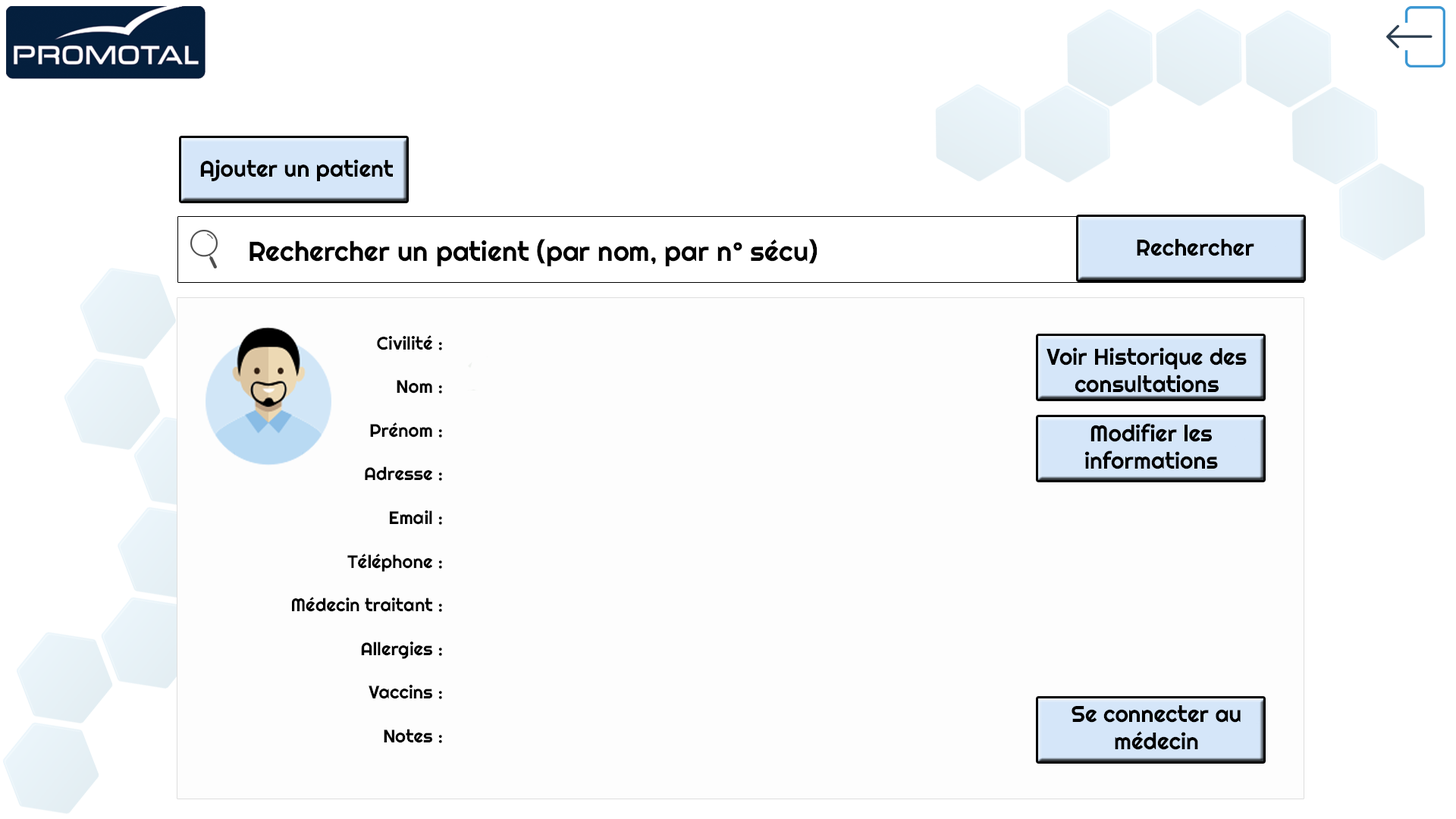
<style>
.page{position:relative;width:1456px;height:819px;background:#ffffff}
.page>*{position:absolute;margin:0}
.t1{font:22.7px "Righteous-Regular";color:#000000}
.t2{font:27.3px "Righteous-Regular";color:#000000}
.t3{font:18.2px "Righteous-Regular";color:#000000}
</style>
<div class="page">
<p class="t1" style="left:200px;top:159px;width:193px;height:22px">Ajouter un patient</p>
<p class="t2" style="left:249px;top:239px;width:568px;height:28px">Rechercher un patient (par nom, par n° sécu)</p>
<p class="t1" style="left:1137px;top:239px;width:117px;height:17px">Rechercher</p>
<p class="t3" style="left:292px;top:335px;width:150px;height:408px;text-align:right">Civilité :<br><br>Nom :<br><br>Prénom :<br><br>Adresse :<br><br>Email :<br><br>Téléphone :<br><br>Médecin traitant :<br><br>Allergies :<br><br>Vaccins :<br><br>Notes :</p>
<p class="t1" style="left:1046px;top:347px;width:201px;height:46px;text-align:center">Voir Historique des consultations</p>
<p class="t1" style="left:1084px;top:423px;width:134px;height:46px;text-align:center">Modifier les informations</p>
<p class="t1" style="left:1072px;top:705px;width:169px;height:45px;text-align:center">Se connecter au médecin</p>
</div>
